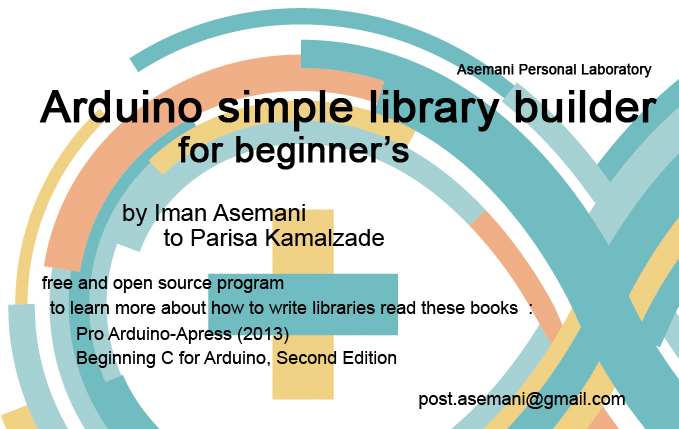
<style>
.page{position:relative;width:679px;height:429px;background:#ffffff}
.page>*{position:absolute;margin:0}
.t1{font:14px "ArialMT";color:#000000;font-weight:bold}
.t2{font:45px "ArialMT";color:#000000;font-weight:bold}
.t3{font:36px "ArialMT";color:#000000;font-weight:bold}
.t4{font:24px "ArialMT";color:#000000}
.t5{font:18px "ArialMT";color:#000000}
</style>
<div class="page">
<p class="t1" style="left:457px;top:63px;width:195px;height:15px">Asemani Personal Laboratory</p>
<p class="t2" style="left:39px;top:90px;width:618px;height:42px">Arduino simple library builder</p>
<p class="t3" style="left:178px;top:136px;width:231px;height:34px">for beginner’s</p>
<p class="t4" style="left:123px;top:204px;width:182px;height:22px">by Iman Asemani</p>
<p class="t4" style="left:163px;top:228px;width:221px;height:18px">to Parisa Kamalzade</p>
<p class="t5" style="left:42px;top:276px;width:242px;height:17px">free and open source program</p>
<p class="t5" style="left:50px;top:301px;width:482px;height:13px">:  to learn more about how to write libraries read these books</p>
<p class="t5" style="left:77px;top:327px;width:212px;height:17px">(Pro Arduino-Apress (2013</p>
<p class="t5" style="left:77px;top:351px;width:320px;height:17px">Beginning C for Arduino, Second Edition</p>
<p class="t5" style="left:419px;top:392px;width:206px;height:17px">post.asemani@gmail.com</p>
</div>
